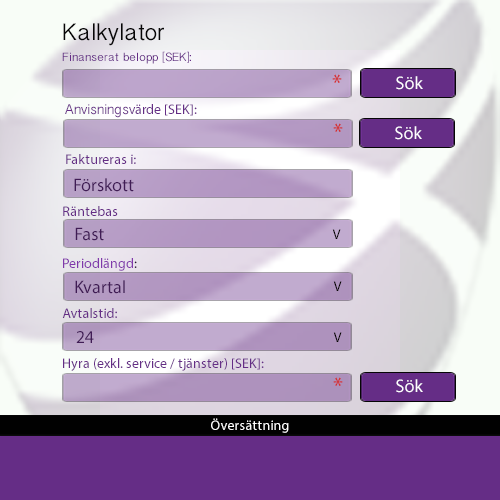
<style>
.page{position:relative;width:500px;height:500px}
.page>*{position:absolute;margin:0}
.t1{font:24px "MalayalamSangamMN";color:#070607}
.t2{font:12px "MalayalamSangamMN";color:#652d86}
.t3{font:24px "MyriadPro-Regular";color:#d42f2f}
.t4{font:18px "MyriadPro-Regular";color:#fefdff}
.t5{font:14px "MalayalamSangamMN";color:#652d86}
.t6{font:14px "MyriadPro-Regular";color:#652d86}
.t7{font:18px "MyriadPro-Regular";color:#401c55}
.t8{font:14px "MyriadPro-Regular";color:#070404}
.t9{font:14px "MyriadPro-Regular";color:#8038ab}
.t10{font:14px "MyriadPro-Regular";color:#271034}
.t11{font:14px "MyriadPro-Regular";color:#fefefe}
</style>
<div class="page">
<p class="t1" style="left:63px;top:23px;width:101px;height:23px">Kalkylator</p>
<p class="t2" style="left:62px;top:51px;width:129px;height:13px">Finanserat belopp [SEK]:</p>
<p class="t3" style="left:332px;top:74px;width:10px;height:9px">*</p>
<p class="t4" style="left:396px;top:76px;width:27px;height:14px">Sök</p>
<p class="t5" style="left:65px;top:104px;width:132px;height:14px">Anvisningsv<span class="t6">ärde [SEK]:</span></p>
<p class="t3" style="left:333px;top:123px;width:10px;height:9px">*</p>
<p class="t4" style="left:395px;top:126px;width:27px;height:14px">Sök</p>
<p class="t6" style="left:66px;top:154px;width:70px;height:10px">Faktureras i:</p>
<p class="t7" style="left:74px;top:178px;width:60px;height:14px">Förskott</p>
<p class="t6" style="left:63px;top:206px;width:55px;height:10px">Räntebas</p>
<p class="t7" style="left:75px;top:227px;width:29px;height:14px">Fast</p>
<p class="t8" style="left:332px;top:229px;width:9px;height:10px">V</p>
<p class="t9" style="left:63px;top:258px;width:74px;height:13px">Periodlängd<span class="t10">:</span></p>
<p class="t7" style="left:75px;top:280px;width:50px;height:14px">Kvartal</p>
<p class="t8" style="left:333px;top:281px;width:9px;height:10px">V</p>
<p class="t6" style="left:62px;top:308px;width:55px;height:10px">Avtalstid:</p>
<p class="t7" style="left:76px;top:331px;width:18px;height:12px">24</p>
<p class="t8" style="left:333px;top:332px;width:9px;height:10px">V</p>
<p class="t6" style="left:63px;top:358px;width:201px;height:13px">Hyra (exkl. service / tjänster) [SEK]:</p>
<p class="t3" style="left:333px;top:377px;width:10px;height:9px">*</p>
<p class="t4" style="left:396px;top:379px;width:27px;height:14px">Sök</p>
<p class="t11" style="left:211px;top:418px;width:78px;height:15px">Översättning</p>
</div>
